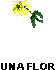
<style>
.page{position:relative;width:56px;height:70px;background:#ffffff}
.page>*{position:absolute;margin:0}
.t1{font:10.3px "Arial-BoldMT";color:#000000;scale:1.11 1}
</style>
<div class="page">
<p class="t1" style="left:1px;top:63px;width:54px;height:7px">UNA FLOR</p>
</div>
